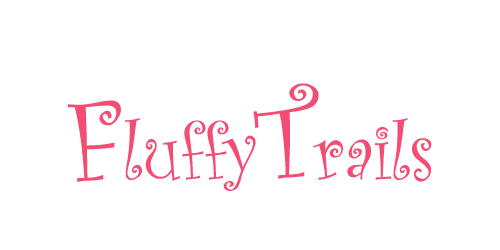
<style>
.page{position:relative;width:500px;height:250px;background:#ffffff}
.page>*{position:absolute;margin:0}
.t1{font:80px "CurlzMT";color:#f44d74}
.t2{font:120px "CurlzMT";color:#f44d74}
</style>
<div class="page">
<p class="t1" style="left:67px;top:83px;width:365px;height:108px"><span class="t2">F</span>luffy<span class="t2">T</span>rails</p>
</div>
